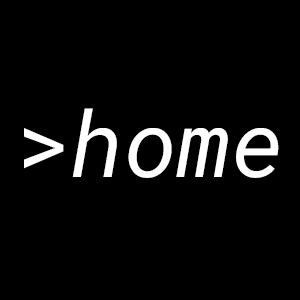
<style>
.page{position:relative;width:300px;height:300px;background:#000000}
.page>*{position:absolute;margin:0}
.t1{font:91.2px "RobotoMono-Italic";color:#ffffff}
.t2{font:91.2px "RobotoMono-Regular";color:#ffffff}
</style>
<div class="page">
<p class="t1" style="left:24px;top:108px;width:255px;height:70px"><span class="t2">&gt;</span>home</p>
</div>
